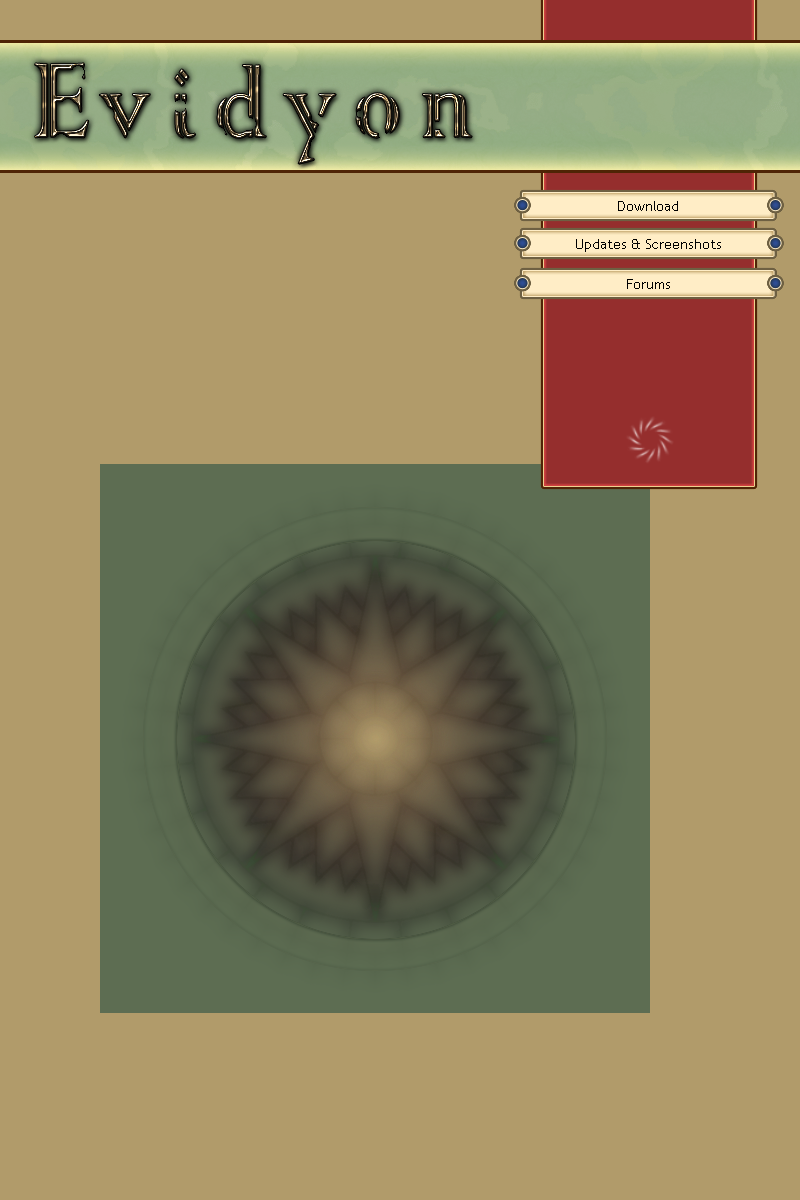
<style>
.page{position:relative;width:800px;height:1200px;background:#b19b6a}
.page>*{position:absolute;margin:0}
.t1{font:120px "ColonnaMT";letter-spacing:0.2em;scale:0.8 1}
.t2{font:140px "ColonnaMT";letter-spacing:0.075em;scale:0.8 1}
.t3{font:14px "TrebuchetMS";color:#000000}
</style>
<div class="page">
<p class="t1" style="left:35px;top:63px;width:437px;height:101px"><span class="t2">E</span>vidyon</p>
<p class="t3" style="left:618px;top:201px;width:60px;height:10px">Download</p>
<p class="t3" style="left:576px;top:239px;width:145px;height:13px">Updates &amp; Screenshots</p>
<p class="t3" style="left:627px;top:279px;width:43px;height:10px">Forums</p>
</div>
